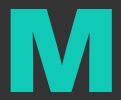
<style>
.page{position:relative;width:121px;height:100px;background:#10cab7}
.page>*{position:absolute;margin:0}
.t1{font:125px "WorkSans-ExtraBold";color:#10cab7}
</style>
<div class="page">
<p class="t1" style="left:10px;top:9px;width:102px;height:83px">M</p>
</div>
